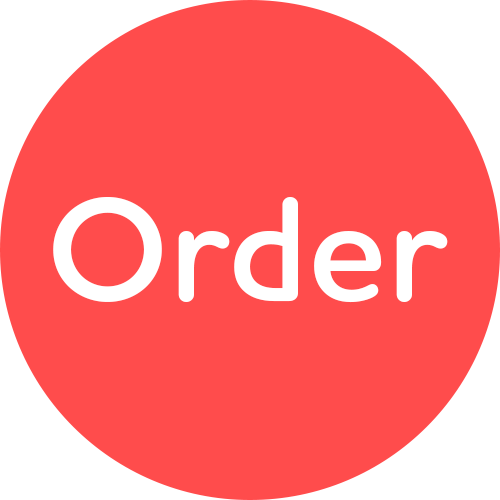
<style>
.page{position:relative;width:500px;height:500px;background:#ff4c4c}
.page>*{position:absolute;margin:0}
.t1{font:150px "HouschkaRounded-DemiBold";color:#ffffff}
</style>
<div class="page">
<p class="t1" style="left:53px;top:197px;width:395px;height:106px">Order</p>
</div>
